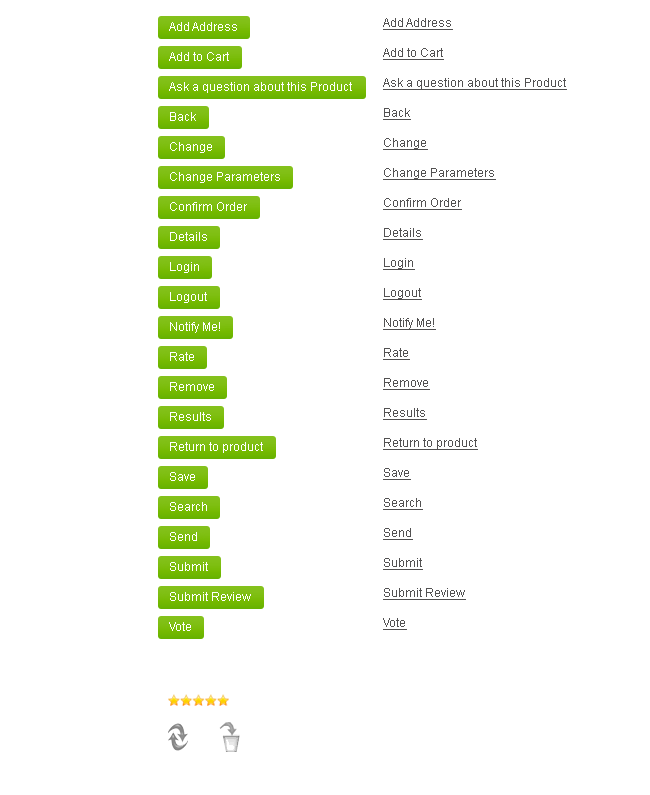
<style>
.page{position:relative;width:650px;height:795px;background:#ffffff}
.page>*{position:absolute;margin:0}
.t1{font:12px/30px "ArialMT";color:#525151;text-decoration:underline}
</style>
<div class="page">
<p class="t1" style="left:383px;top:18px;width:184px;height:612px">Add Address<br>Add to Cart<br>Ask a question about this Product<br>Back<br>Change<br>Change Parameters<br>Confirm Order<br>Details<br>Login<br>Logout<br>Notify Me!<br>Rate<br>Remove<br>Results<br>Return to product<br>Save<br>Search<br>Send<br>Submit<br>Submit Review<br>Vote</p>
</div>
